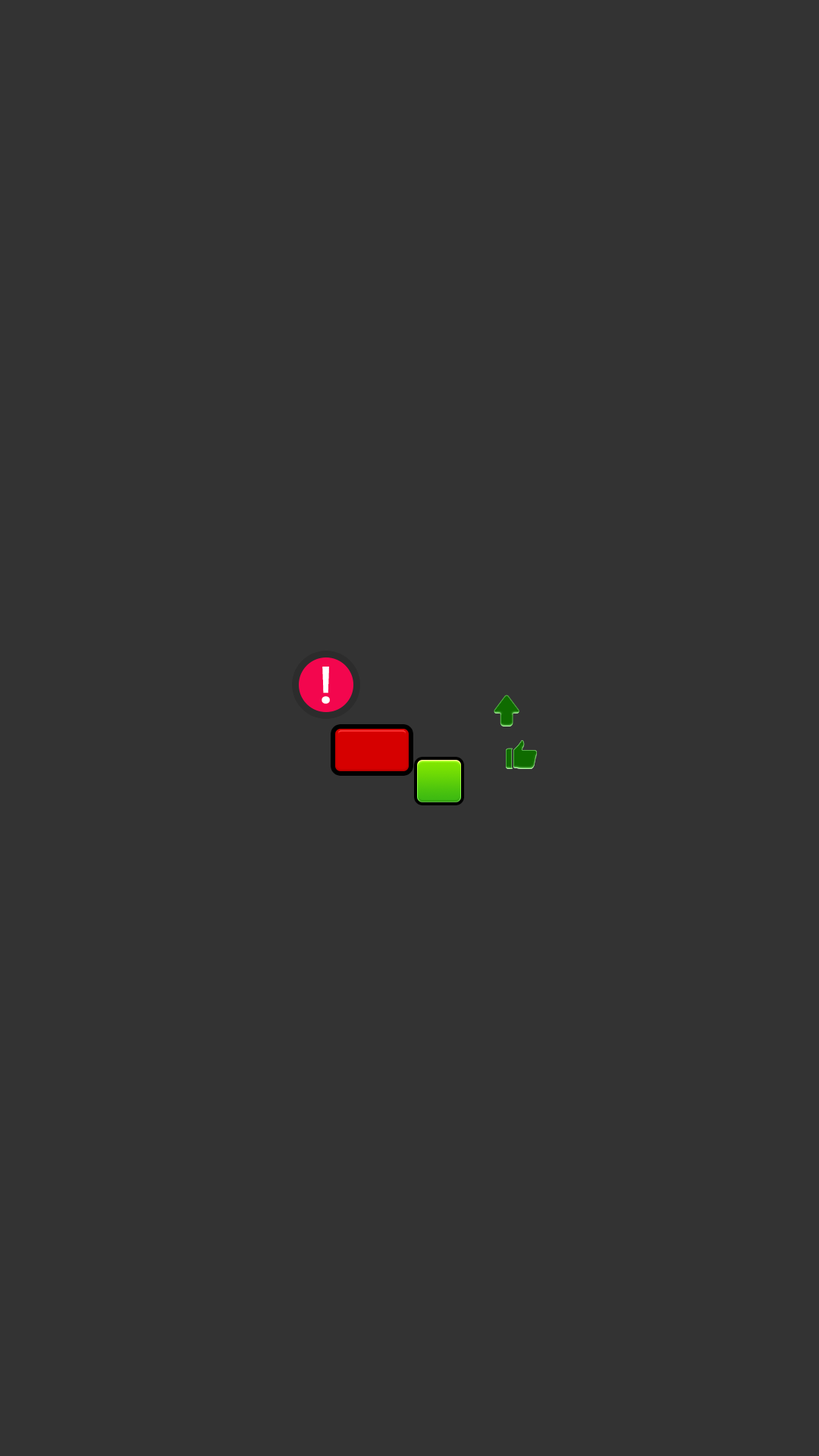
<style>
.page{position:relative;width:819px;height:1456px;background:#333333}
.page>*{position:absolute;margin:0}
.t1{font:53.1px "MyriadPro-Regular";letter-spacing:-0.02em;color:#ffffff;font-weight:bold;scale:1.19 1}
</style>
<div class="page">
<p class="t1" style="left:322px;top:667px;width:8px;height:37px">!</p>
</div>
